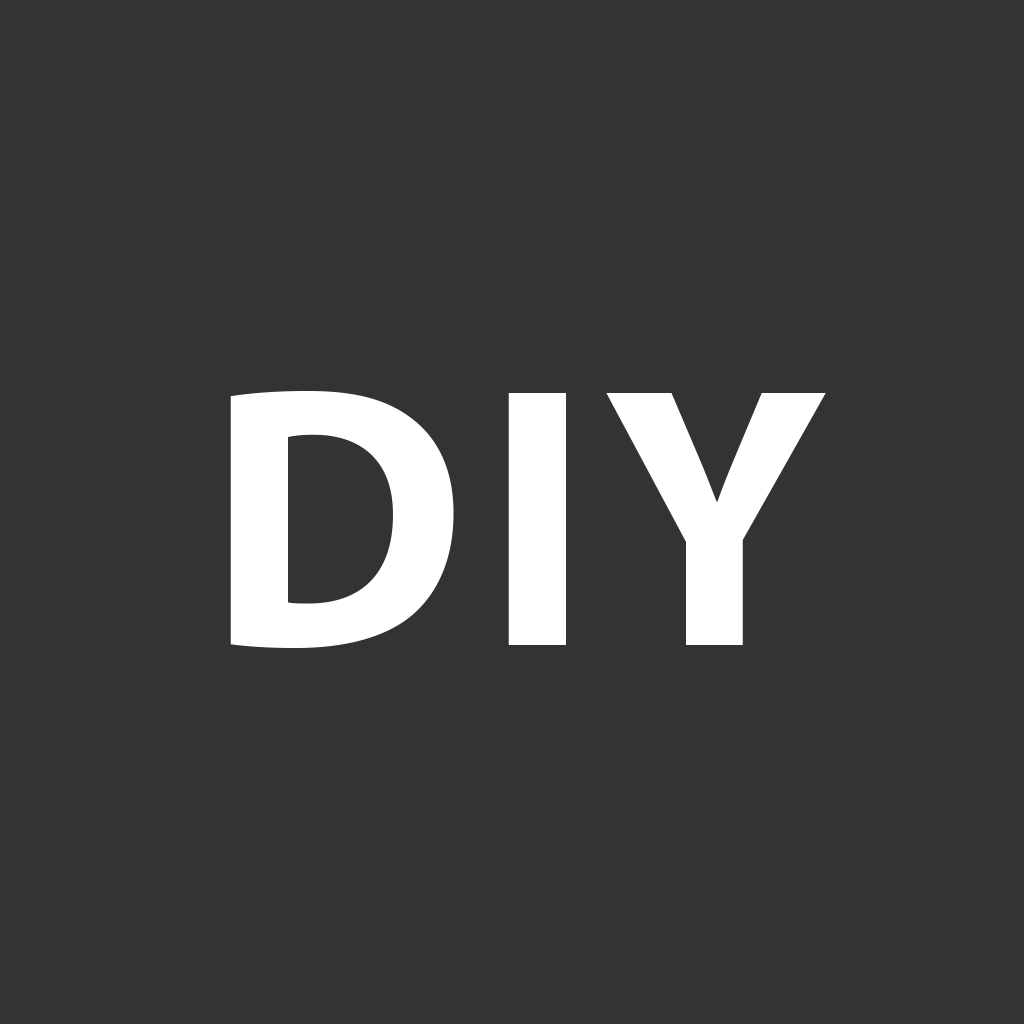
<style>
.page{position:relative;width:1024px;height:1024px;background:#333333}
.page>*{position:absolute;margin:0}
.t1{font:373.6px "MyriadPro-Bold";letter-spacing:0.05em;color:#ffffff}
</style>
<div class="page">
<p class="t1" style="left:230px;top:391px;width:596px;height:258px">DIY</p>
</div>
